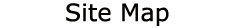
<style>
.page{position:relative;width:234px;height:28px;background:#ffffff}
.page>*{position:absolute;margin:0}
.t1{font:24px "Verdana";color:#030201}
</style>
<div class="page">
<p class="t1" style="left:66px;top:3px;width:103px;height:23px">Site Map</p>
</div>
